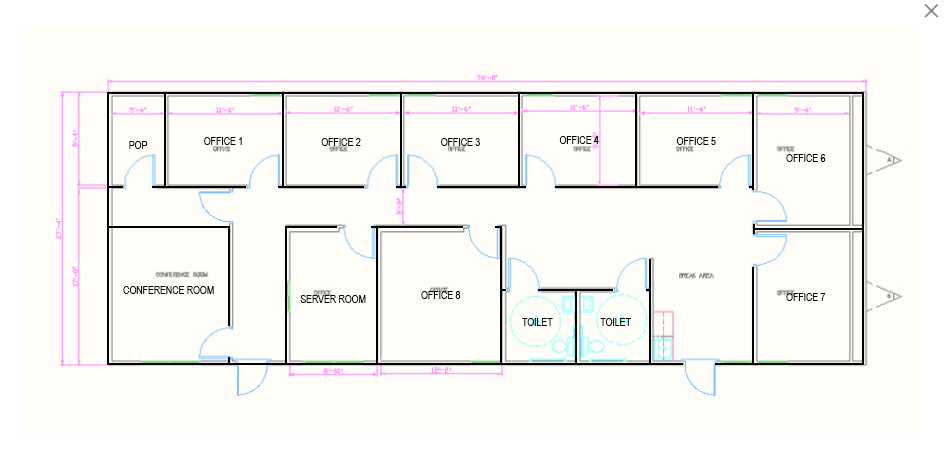
<style>
.page{position:relative;width:944px;height:457px;background:#fefdf8}
.page>*{position:absolute;margin:0}
.t1{font:10.7px "ArialNarrow";color:#000000}
</style>
<div class="page">
<p class="t1" style="left:204px;top:137px;width:38px;height:8px">OFFICE 1</p>
<p class="t1" style="left:559px;top:136px;width:40px;height:8px">OFFICE 4</p>
<p class="t1" style="left:676px;top:137px;width:40px;height:8px">OFFICE 5</p>
<p class="t1" style="left:129px;top:141px;width:19px;height:8px">POP</p>
<p class="t1" style="left:321px;top:138px;width:40px;height:8px">OFFICE 2</p>
<p class="t1" style="left:441px;top:138px;width:39px;height:8px">OFFICE 3</p>
<p class="t1" style="left:786px;top:154px;width:40px;height:8px">OFFICE 6</p>
<p class="t1" style="left:123px;top:286px;width:91px;height:8px">CONFERENCE ROOM</p>
<p class="t1" style="left:421px;top:291px;width:40px;height:8px">OFFICE 8</p>
<p class="t1" style="left:786px;top:293px;width:40px;height:8px">OFFICE 7</p>
<p class="t1" style="left:300px;top:295px;width:66px;height:8px">SERVER ROOM</p>
<p class="t1" style="left:522px;top:318px;width:31px;height:8px">TOILET</p>
<p class="t1" style="left:600px;top:318px;width:31px;height:8px">TOILET</p>
</div>
